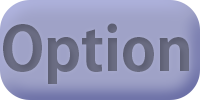
<style>
.page{position:relative;width:200px;height:100px}
.page>*{position:absolute;margin:0}
.t1{font:60px "AdobeGothicStd-Bold";color:#6b6d83}
</style>
<div class="page">
<p class="t1" style="left:3px;top:23px;width:186px;height:61px">Option</p>
</div>
